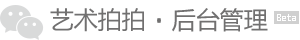
<style>
.page{position:relative;width:300px;height:40px;background:#ffffff}
.page>*{position:absolute;margin:0}
.t1{font:24px "MicrosoftYaHei";color:#717070}
</style>
<div class="page">
<p class="t1" style="left:50px;top:8px;width:94px;height:24px">艺术拍拍</p>
<p class="t1" style="left:172px;top:8px;width:96px;height:24px">后台管理</p>
</div>
